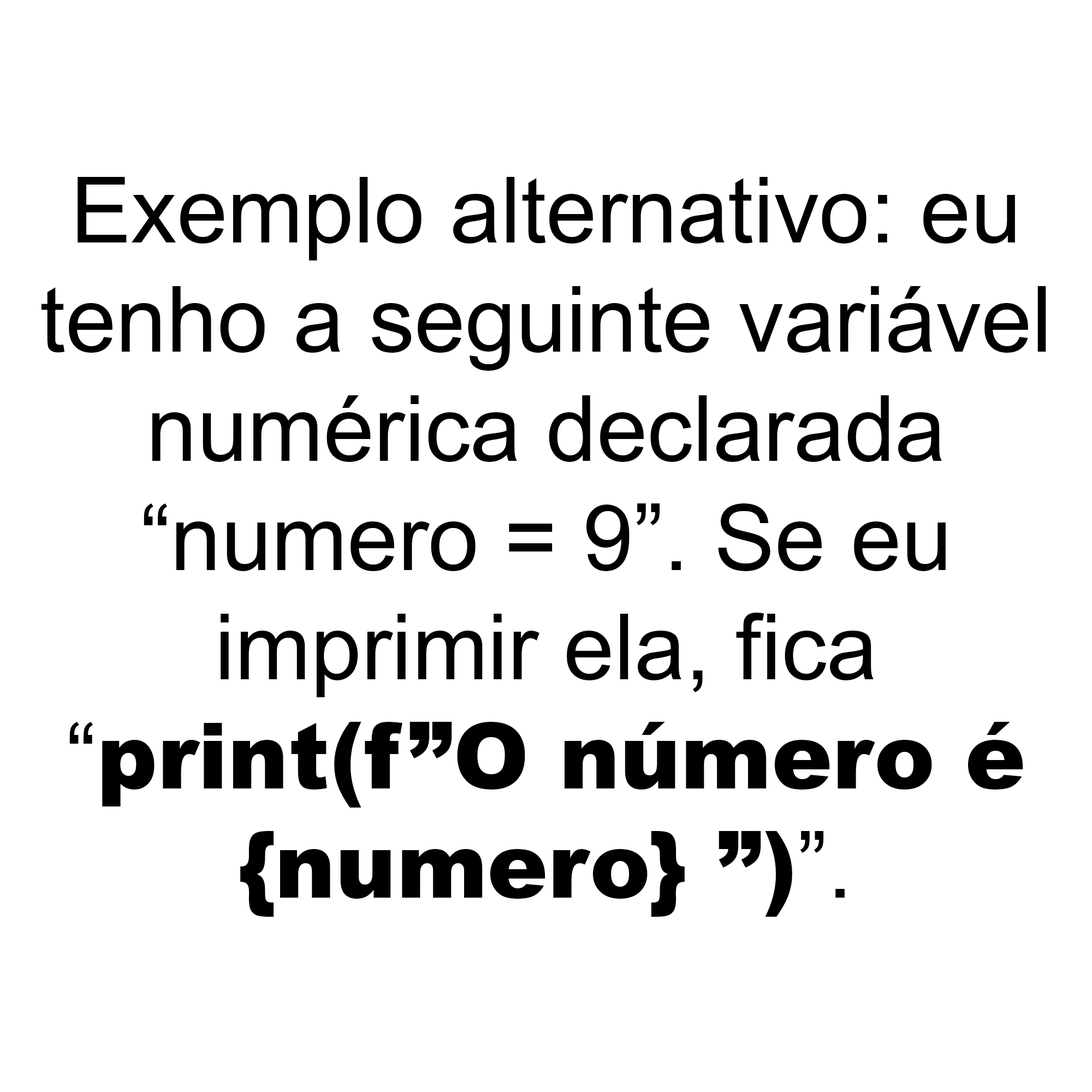
<style>
.page{position:relative;width:1092px;height:1092px;background:#ffffff}
.page>*{position:absolute;margin:0}
.t1{font:91px "ArialMT";color:#000000}
.t2{font:91px "Arial-Black";color:#000000}
</style>
<div class="page">
<p class="t1" style="left:41px;top:177px;width:1005px;height:740px;text-align:center">Exemplo alternativo: eu<br>tenho a seguinte variável<br>numérica declarada<br>“numero = 9”. Se eu<br>imprimir ela, fica<br>“<span class="t2">print(f”O número é<br>{numero} ”)</span>”.</p>
</div>
